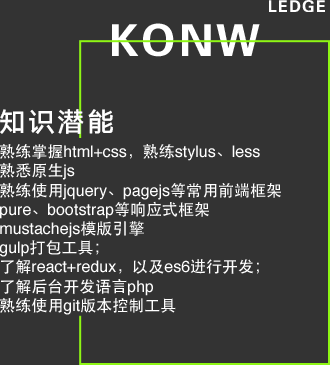
<style>
.page{position:relative;width:330px;height:365px;background:#333333}
.page>*{position:absolute;margin:0}
.t1{font:16px "STHeitiSC-Medium";color:#ffffff}
.t2{font:16px "Helvetica";color:#ffffff}
</style>
<div class="page">
<p class="t1" style="left:0px;top:144px;width:281px;height:171px;text-align:justify">熟练掌握<span class="t2">html+css</span>，熟练<span class="t2">stylus</span>、<span class="t2">less<br></span>熟悉原生<span class="t2">js<br></span>熟练使用<span class="t2">jquery</span>、<span class="t2">pagejs</span>等常用前端框架<span class="t2"><br>pure</span>、<span class="t2">bootstrap</span>等响应式框架<span class="t2"><br>mustachejs</span>模版引擎<span class="t2"><br>gulp</span>打包工具；<br>了解<span class="t2">react+redux</span>，以及<span class="t2">es6</span>进行开发；<br>了解后台开发语言<span class="t2">php<br></span>熟练使用<span class="t2">git</span>版本控制工具</p>
</div>
